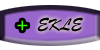
<style>
.page{position:relative;width:100px;height:50px;background:#ffffff}
.page>*{position:absolute;margin:0}
.t1{font:18px "BrushScriptMT";color:#000000}
.t2{font:18px "BrushScriptMT";color:#33ff00}
</style>
<div class="page">
<p class="t1" style="left:37px;top:17px;width:46px;height:15px">EKLE</p>
<p class="t2" style="left:17px;top:20px;width:11px;height:11px">+</p>
</div>
